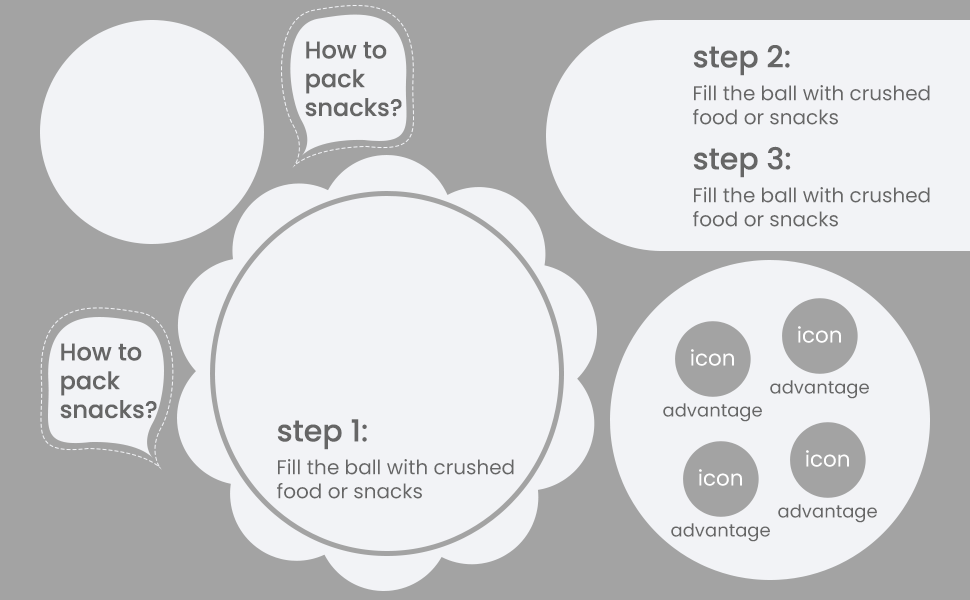
<style>
.page{position:relative;width:970px;height:600px;background:#f2f3f6}
.page>*{position:absolute;margin:0}
.t1{font:24px "Poppins-Medium";color:#666666}
.t2{font:30px "Poppins-Medium";color:#666666}
.t3{font:20px "Poppins-Regular";color:#666666}
.t4{font:21.4px "Poppins-Regular";color:#ffffff}
.t5{font:18px "Poppins-Regular";color:#666666}
</style>
<div class="page">
<p class="t1" style="left:305px;top:41px;width:97px;height:76px">How to <br>pack<br>snacks?</p>
<p class="t2" style="left:693px;top:45px;width:97px;height:31px">step 2:</p>
<p class="t3" style="left:693px;top:85px;width:237px;height:40px">Fill the ball with crushed <br>food or snacks</p>
<p class="t2" style="left:693px;top:146px;width:98px;height:32px">step 3:</p>
<p class="t3" style="left:693px;top:187px;width:237px;height:40px">Fill the ball with crushed <br>food or snacks</p>
<p class="t4" style="left:798px;top:326px;width:43px;height:17px">icon</p>
<p class="t1" style="left:60px;top:343px;width:97px;height:76px">How to <br>pack<br>snacks?</p>
<p class="t4" style="left:691px;top:349px;width:43px;height:17px">icon</p>
<p class="t5" style="left:770px;top:380px;width:99px;height:19px">advantage</p>
<p class="t5" style="left:663px;top:403px;width:99px;height:19px">advantage</p>
<p class="t2" style="left:277px;top:419px;width:90px;height:31px">step 1:</p>
<p class="t3" style="left:277px;top:459px;width:237px;height:40px">Fill the ball with crushed <br>food or snacks</p>
<p class="t4" style="left:806px;top:450px;width:43px;height:17px">icon</p>
<p class="t4" style="left:699px;top:469px;width:43px;height:17px">icon</p>
<p class="t5" style="left:778px;top:504px;width:99px;height:19px">advantage</p>
<p class="t5" style="left:671px;top:523px;width:99px;height:19px">advantage</p>
</div>
